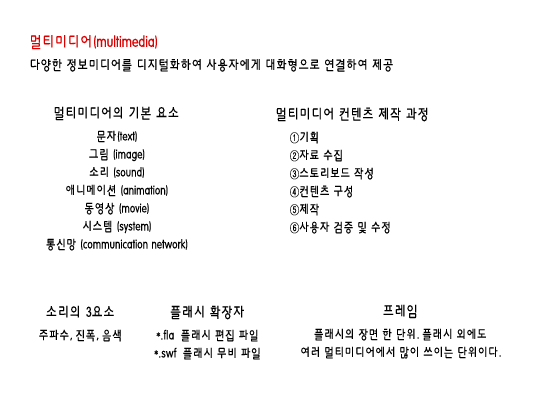
<style>
.page{position:relative;width:550px;height:400px;background:#ffffff}
.page>*{position:absolute;margin:0}
.t1{font:14px/18px "HYkanM";letter-spacing:-0.01em;color:#000000;scale:0.8 1}
.t2{font:16px/24px "HYkanM";letter-spacing:-0.01em;color:#dd0000;scale:0.8 1}
.t3{font:13px/18px "HYkanM";letter-spacing:-0.01em;color:#000000;scale:0.8 1}
.t4{font:15px/24px "HYkanM";letter-spacing:-0.01em;color:#000000;scale:0.8 1}
.t5{font:13px/18px "HYkanM";letter-spacing:0.01em;color:#000000;scale:0.8 1}
</style>
<div class="page">
<p class="t1" style="left:30px;top:35px;width:363px;height:37px"><span class="t2">멀티미디어(multimedia)<br></span>다양한 정보미디어를 디지털화하여 사용자에게 대화형으로 연결하여 제공</p>
<p class="t3" style="left:46px;top:106px;width:142px;height:145px;text-align:center"><span class="t4">멀티미디어의 기본 요소<br></span>문자(text)<br>그림 (image)<br>소리 (sound)<br>애니메이션 (animation)<br>동영상 (movie)<br>시스템 (system)<br>통신망 (communication network)</p>
<p class="t3" style="left:276px;top:107px;width:152px;height:127px"><span class="t4">멀티미디어 컨텐츠 제작 과정<br></span>    ①기획<br>    ②자료 수집<br>    ③스토리보드 작성<br>    ④컨텐츠 구성<br>    ⑤제작<br>    ⑥사용자 검증 및 수정</p>
<p class="t3" style="left:39px;top:305px;width:82px;height:37px;text-align:center"><span class="t4">소리의 3요소<br></span>주파수, 진폭, 음색</p>
<p class="t3" style="left:154px;top:305px;width:106px;height:55px;text-align:center"><span class="t4">플래시 확장자<br></span><span class="t5">*.fla</span>  플래시 편집 파일<br><span class="t5">*.swf</span>  플래시 무비 파일</p>
<p class="t3" style="left:301px;top:304px;width:200px;height:55px;text-align:center"><span class="t4">프레임<br></span>플래시의 장면 한 단위. 플래시 외에도 <br>여러 멀티미디어에서 많이 쓰이는 단위이다.</p>
</div>
